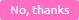
<style>
.page{position:relative;width:79px;height:20px;background:#ff6ec3}
.page>*{position:absolute;margin:0}
.t1{font:12px "Ubuntu-Medium";color:#ffffff}
</style>
<div class="page">
<p class="t1" style="left:11px;top:5px;width:59px;height:11px">No, thanks</p>
</div>
